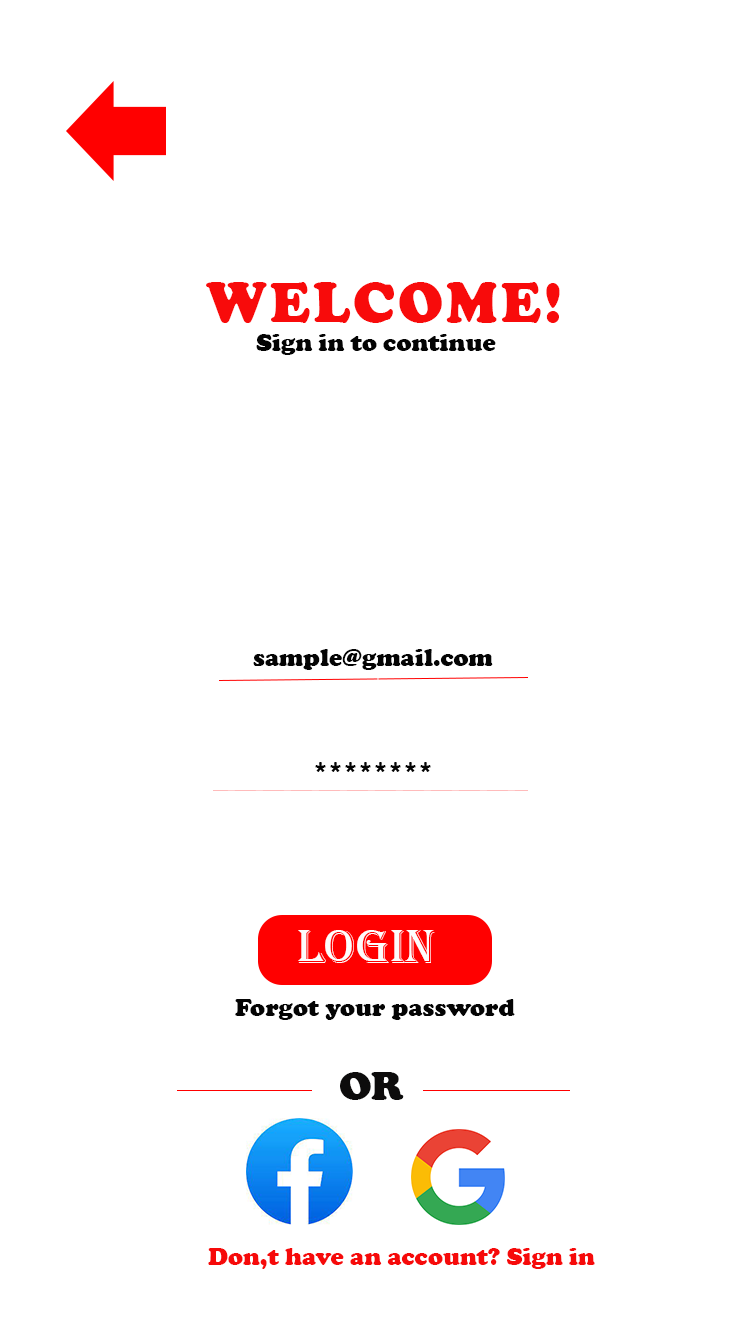
<style>
.page{position:relative;width:750px;height:1334px;background:#ffffff}
.page>*{position:absolute;margin:0}
.t1{font:58.3px "CooperBlack";letter-spacing:0.05em;color:#f80b0b;text-transform:uppercase}
.t2{font:25px "CooperBlack";color:#040404}
.t3{font:50px "Algerian";color:#fdfcfc}
.t4{font:41.7px "CooperBlack";color:#0d0c0c;text-transform:uppercase}
.t5{font:25px "CooperBlack";color:#f60a0a}
</style>
<div class="page">
<p class="t1" style="left:206px;top:282px;width:354px;height:41px">welcome!</p>
<p class="t2" style="left:256px;top:334px;width:240px;height:21px">Sign in to continue</p>
<p class="t2" style="left:253px;top:649px;width:240px;height:21px">sample@gmail.com</p>
<p class="t2" style="left:315px;top:762px;width:116px;height:10px">********</p>
<p class="t3" style="left:298px;top:930px;width:137px;height:33px">login</p>
<p class="t2" style="left:235px;top:999px;width:280px;height:21px">Forgot your password</p>
<p class="t4" style="left:340px;top:1072px;width:64px;height:28px">or</p>
<p class="t5" style="left:208px;top:1248px;width:387px;height:21px">Don,t have an account? Sign in</p>
</div>
